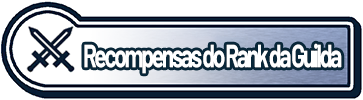
<style>
.page{position:relative;width:363px;height:100px;background:#ffffff}
.page>*{position:absolute;margin:0}
.t1{font:32px "Barlow-Bold";letter-spacing:-0.1em;color:#ffffff;scale:0.71 1}
</style>
<div class="page">
<p class="t1" style="left:84px;top:43px;width:258px;height:31px">Recompensas do Rank da Guilda</p>
</div>
